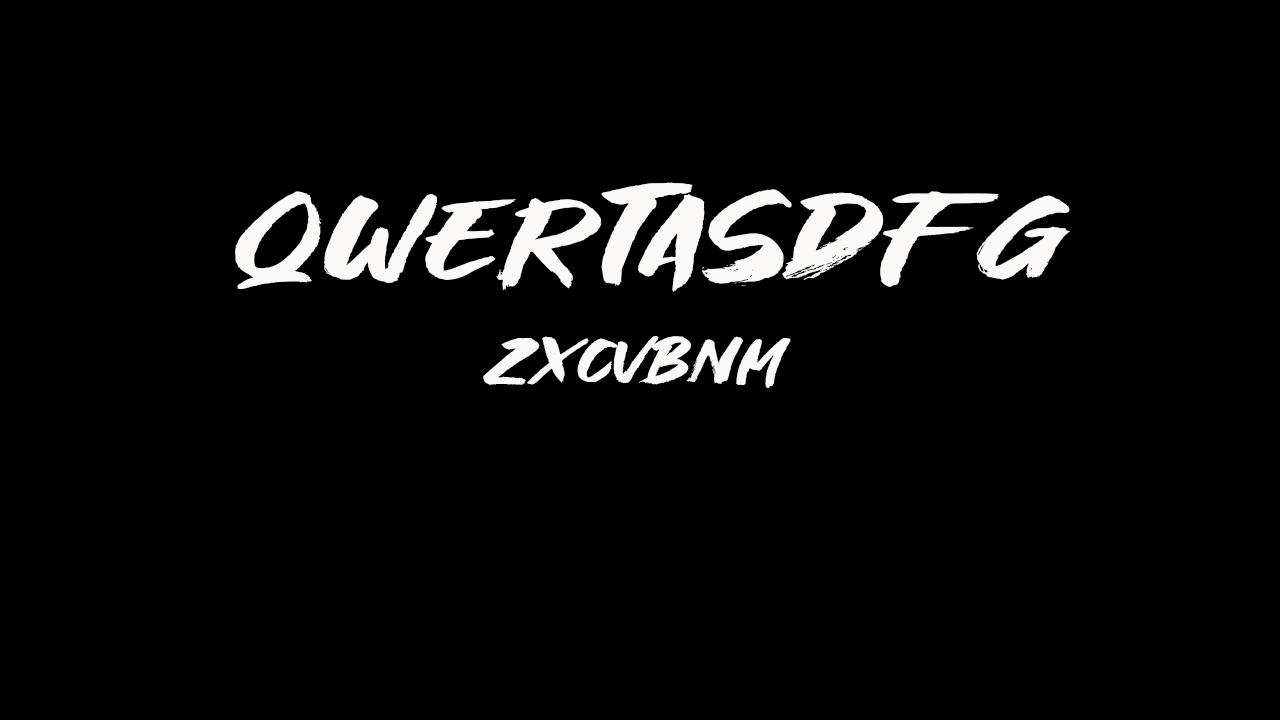
<style>
.page{position:relative;width:1280px;height:720px;background:#000000}
.page>*{position:absolute;margin:0}
.t1{font:150px "Great-Fighter";color:#fbf8f8}
.t2{font:80px "Great-Fighter";color:#fbf8f8}
</style>
<div class="page">
<p class="t1" style="left:234px;top:182px;width:837px;height:110px">qwertasdfg</p>
<p class="t2" style="left:483px;top:336px;width:308px;height:52px">zxcvbnm</p>
</div>
